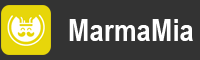
<style>
.page{position:relative;width:200px;height:60px;background:#333333}
.page>*{position:absolute;margin:0}
.t1{font:30.9px "ArialNarrow-Bold";color:#ffffff}
</style>
<div class="page">
<p class="t1" style="left:69px;top:19px;width:124px;height:22px">MarmaMia</p>
</div>
